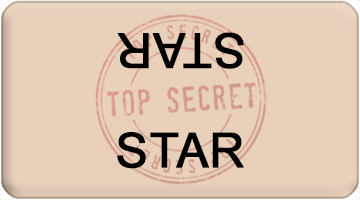
<style>
.page{position:relative;width:360px;height:200px;background:#e8d0bb}
.page>*{position:absolute;margin:0}
.t1{font:48px "ArialMT";color:#000000;font-weight:bold}
</style>
<div class="page">
<p class="t1" style="left:117px;top:32px;width:127px;height:37px;rotate:180deg">STAR</p>
<p class="t1" style="left:117px;top:132px;width:127px;height:37px">STAR</p>
</div>
